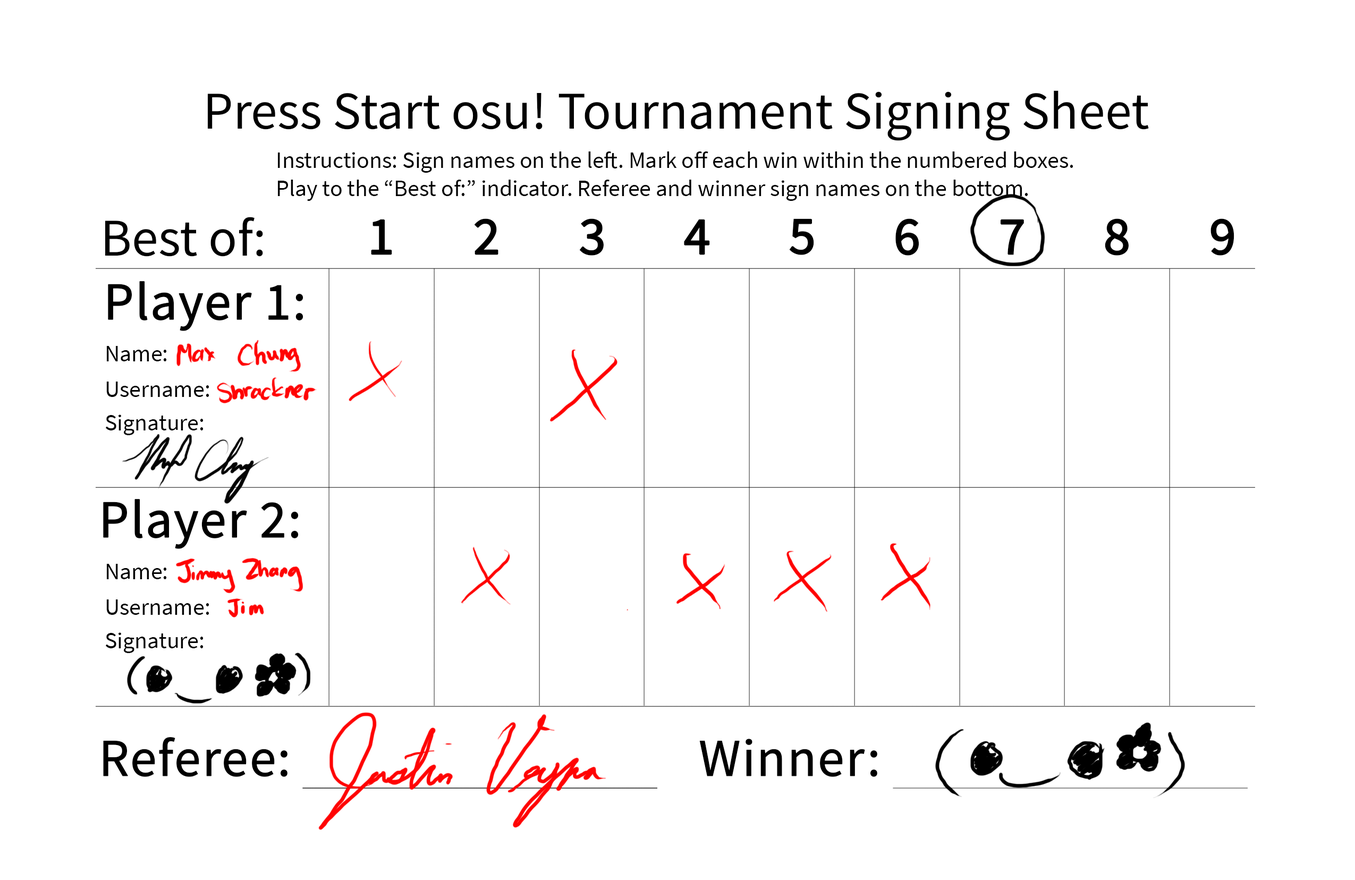
<style>
.page{position:relative;width:1355px;height:880px;background:#ffffff}
.page>*{position:absolute;margin:0}
.t1{font:53.4px "SourceSansPro-Regular";color:#000000}
.t2{font:23.3px "SourceSansPro-Regular";color:#000000}
.t3{font:53.4px "SourceSansPro-Regular";color:#000000;font-weight:bold}
</style>
<div class="page">
<p class="t1" style="left:208px;top:90px;width:941px;height:51px">Press Start osu! Tournament Signing Sheet</p>
<p class="t2" style="left:278px;top:151px;width:795px;height:50px">Instructions: Sign names on the left. Mark off each win within the numbered boxes.<br>Play to the “Best of:” indicator. Referee and winner sign names on the bottom.</p>
<p class="t1" style="left:105px;top:217px;width:158px;height:40px">Best of:</p>
<p class="t3" style="left:371px;top:219px;width:21px;height:36px">1</p>
<p class="t3" style="left:474px;top:218px;width:24px;height:37px">2</p>
<p class="t3" style="left:579px;top:218px;width:25px;height:38px">3</p>
<p class="t3" style="left:684px;top:219px;width:26px;height:36px">4</p>
<p class="t3" style="left:789px;top:218px;width:25px;height:37px">5</p>
<p class="t3" style="left:895px;top:218px;width:24px;height:38px">6</p>
<p class="t3" style="left:1001px;top:219px;width:23px;height:36px">7</p>
<p class="t3" style="left:1105px;top:218px;width:24px;height:38px">8</p>
<p class="t3" style="left:1211px;top:218px;width:23px;height:38px">9</p>
<p class="t3" style="left:108px;top:281px;width:195px;height:50px">Player 1:</p>
<p class="t2" style="left:107px;top:346px;width:60px;height:15px">Name:</p>
<p class="t2" style="left:106px;top:382px;width:103px;height:15px">Username:</p>
<p class="t2" style="left:105px;top:414px;width:99px;height:21px">Signature:</p>
<p class="t3" style="left:103px;top:499px;width:196px;height:50px">Player 2:</p>
<p class="t2" style="left:107px;top:564px;width:60px;height:15px">Name:</p>
<p class="t2" style="left:106px;top:599px;width:103px;height:16px">Username:</p>
<p class="t2" style="left:105px;top:632px;width:99px;height:21px">Signature:</p>
<p class="t3" style="left:103px;top:737px;width:184px;height:40px">Referee:</p>
<p class="t3" style="left:699px;top:739px;width:178px;height:38px">Winner:</p>
</div>
